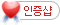
<style>
.page{position:relative;width:60px;height:25px;background:#ffffff}
.page>*{position:absolute;margin:0}
.t1{font:12px "morris9";letter-spacing:-0.075em;color:#d32221}
</style>
<div class="page">
<p class="t1" style="left:24px;top:6px;width:28px;height:10px">인증샵</p>
</div>
